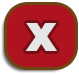
<style>
.page{position:relative;width:79px;height:75px;background:#ae131f}
.page>*{position:absolute;margin:0}
.t1{font:40px "Montserrat-Black";color:#e6e6e6}
</style>
<div class="page">
<p class="t1" style="left:25px;top:23px;width:32px;height:28px">X</p>
</div>
